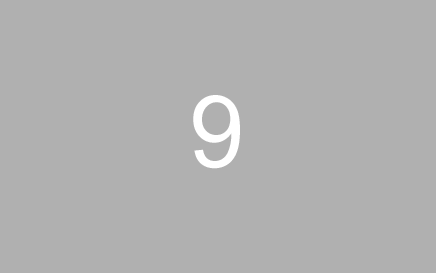
<style>
.page{position:relative;width:436px;height:273px;background:#b0b0b0}
.page>*{position:absolute;margin:0}
.t1{font:100px "ArialMT";color:#ffffff}
</style>
<div class="page">
<p class="t1" style="left:193px;top:95px;width:47px;height:74px">9</p>
</div>
